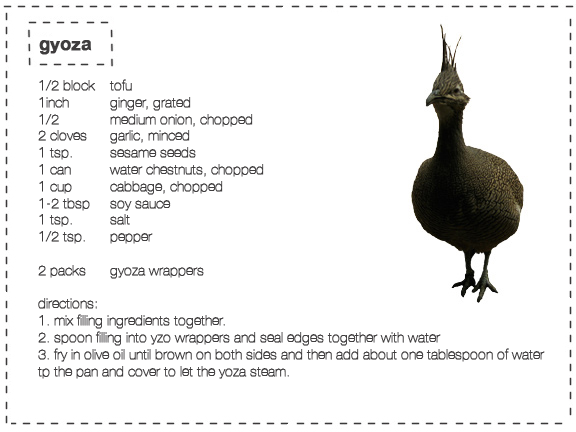
<style>
.page{position:relative;width:576px;height:432px;background:#ffffff}
.page>*{position:absolute;margin:0}
.t1{font:18px "HelveticaNeue-Bold";color:#3f3d3e;font-weight:bold}
.t2{font:14px "HelveticaNeue-UltraLight";color:#3f3d3e;font-weight:bold}
</style>
<div class="page">
<p class="t1" style="left:39px;top:40px;width:53px;height:15px">gyoza</p>
<p class="t2" style="left:37px;top:79px;width:508px;height:300px">1/2 block  tofu<br>1inch   ginger, grated<br>1/2   medium onion, chopped<br>2 cloves garlic, minced<br>1 tsp.  sesame seeds<br>1 can  water chestnuts, chopped<br>1 cup  cabbage, chopped<br>1-2 tbsp soy sauce<br>1 tsp.  salt<br>1/2 tsp.  pepper<br><br>2 packs gyoza wrappers<br><br>directions:<br>1. mix filling ingredients together. <br>2. spoon filling into yzo wrappers and seal edges together with water<br>3. fry in olive oil until brown on both sides and then add about one tablespoon of water<br>tp the pan and cover to let the yoza steam.</p>
</div>
